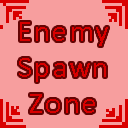
<style>
.page{position:relative;width:128px;height:128px;background:#f79e9e}
.page>*{position:absolute;margin:0}
.t1{font:30px "Calibri";letter-spacing:0.075em;color:#d90000}
</style>
<div class="page">
<p class="t1" style="left:19px;top:22px;width:89px;height:91px;text-align:center">Enemy<br>Spawn<br>Zone</p>
</div>
